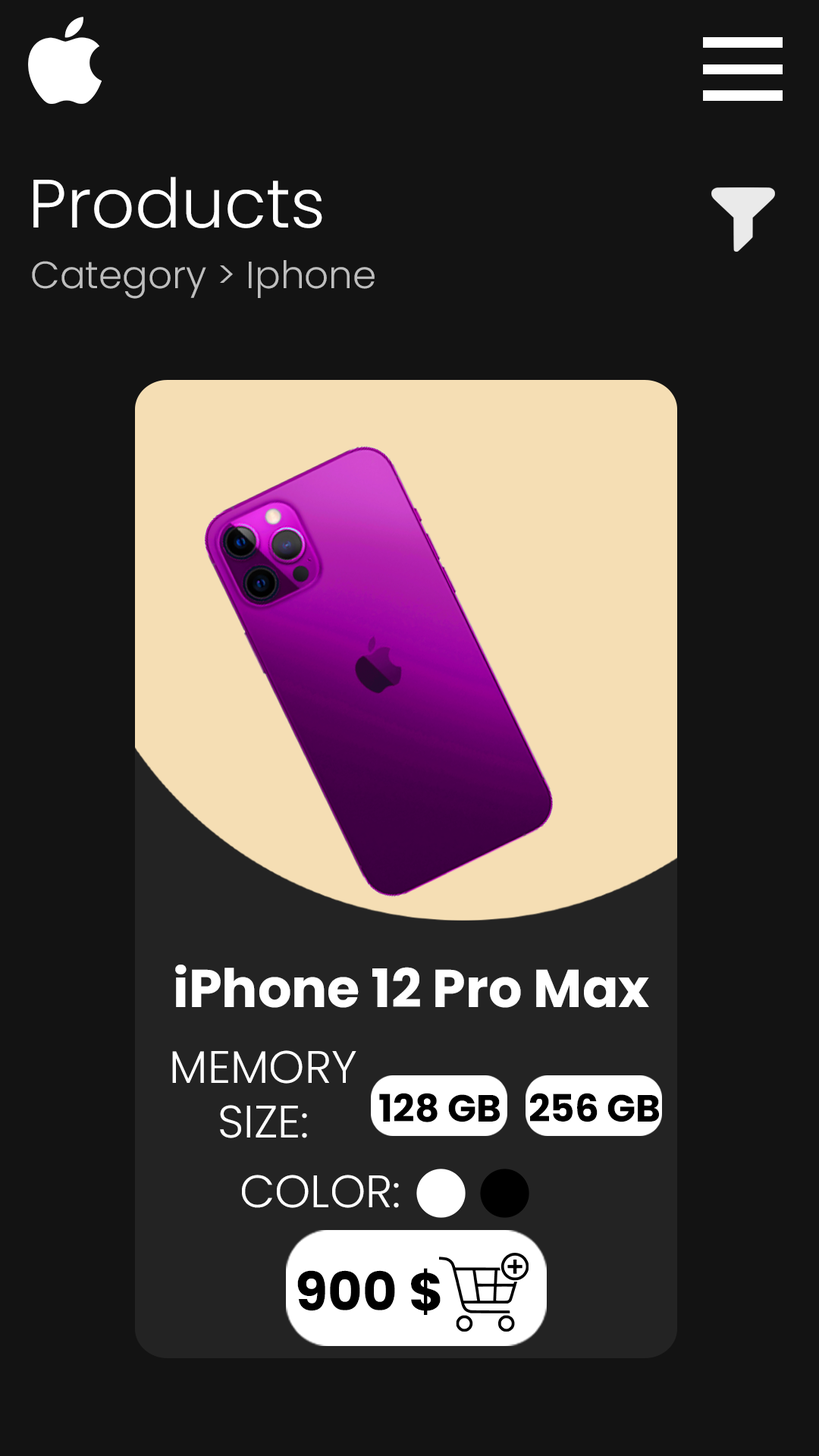
<style>
.page{position:relative;width:819px;height:1456px;background:#131313}
.page>*{position:absolute;margin:0}
.t1{font:68.2px "Poppins-Light";color:#ffffff}
.t2{font:37.9px "Poppins-Light";color:#bebebe}
.t3{font:53.1px "Poppins-Bold";color:#ffffff}
.t4{font:45.5px "Poppins-Light";color:#ffffff}
.t5{font:37.9px "Poppins-Bold";color:#000000}
.t6{font:53.1px "Poppins-Bold";color:#000000}
</style>
<div class="page">
<p class="t1" style="left:33px;top:177px;width:289px;height:51px">Products</p>
<p class="t2" style="left:32px;top:260px;width:343px;height:39px">Category &gt; Iphone</p>
<p class="t3" style="left:175px;top:965px;width:474px;height:43px">iPhone 12 Pro Max</p>
<p class="t4" style="left:172px;top:1050px;width:184px;height:88px;text-align:center">MEMORY<br>SIZE:</p>
<p class="t5" style="left:379px;top:1093px;width:121px;height:29px">128 GB</p>
<p class="t5" style="left:529px;top:1093px;width:130px;height:29px">256 GB</p>
<p class="t4" style="left:242px;top:1175px;width:157px;height:33px">COLOR:</p>
<p class="t6" style="left:297px;top:1268px;width:144px;height:47px">900 $</p>
</div>
